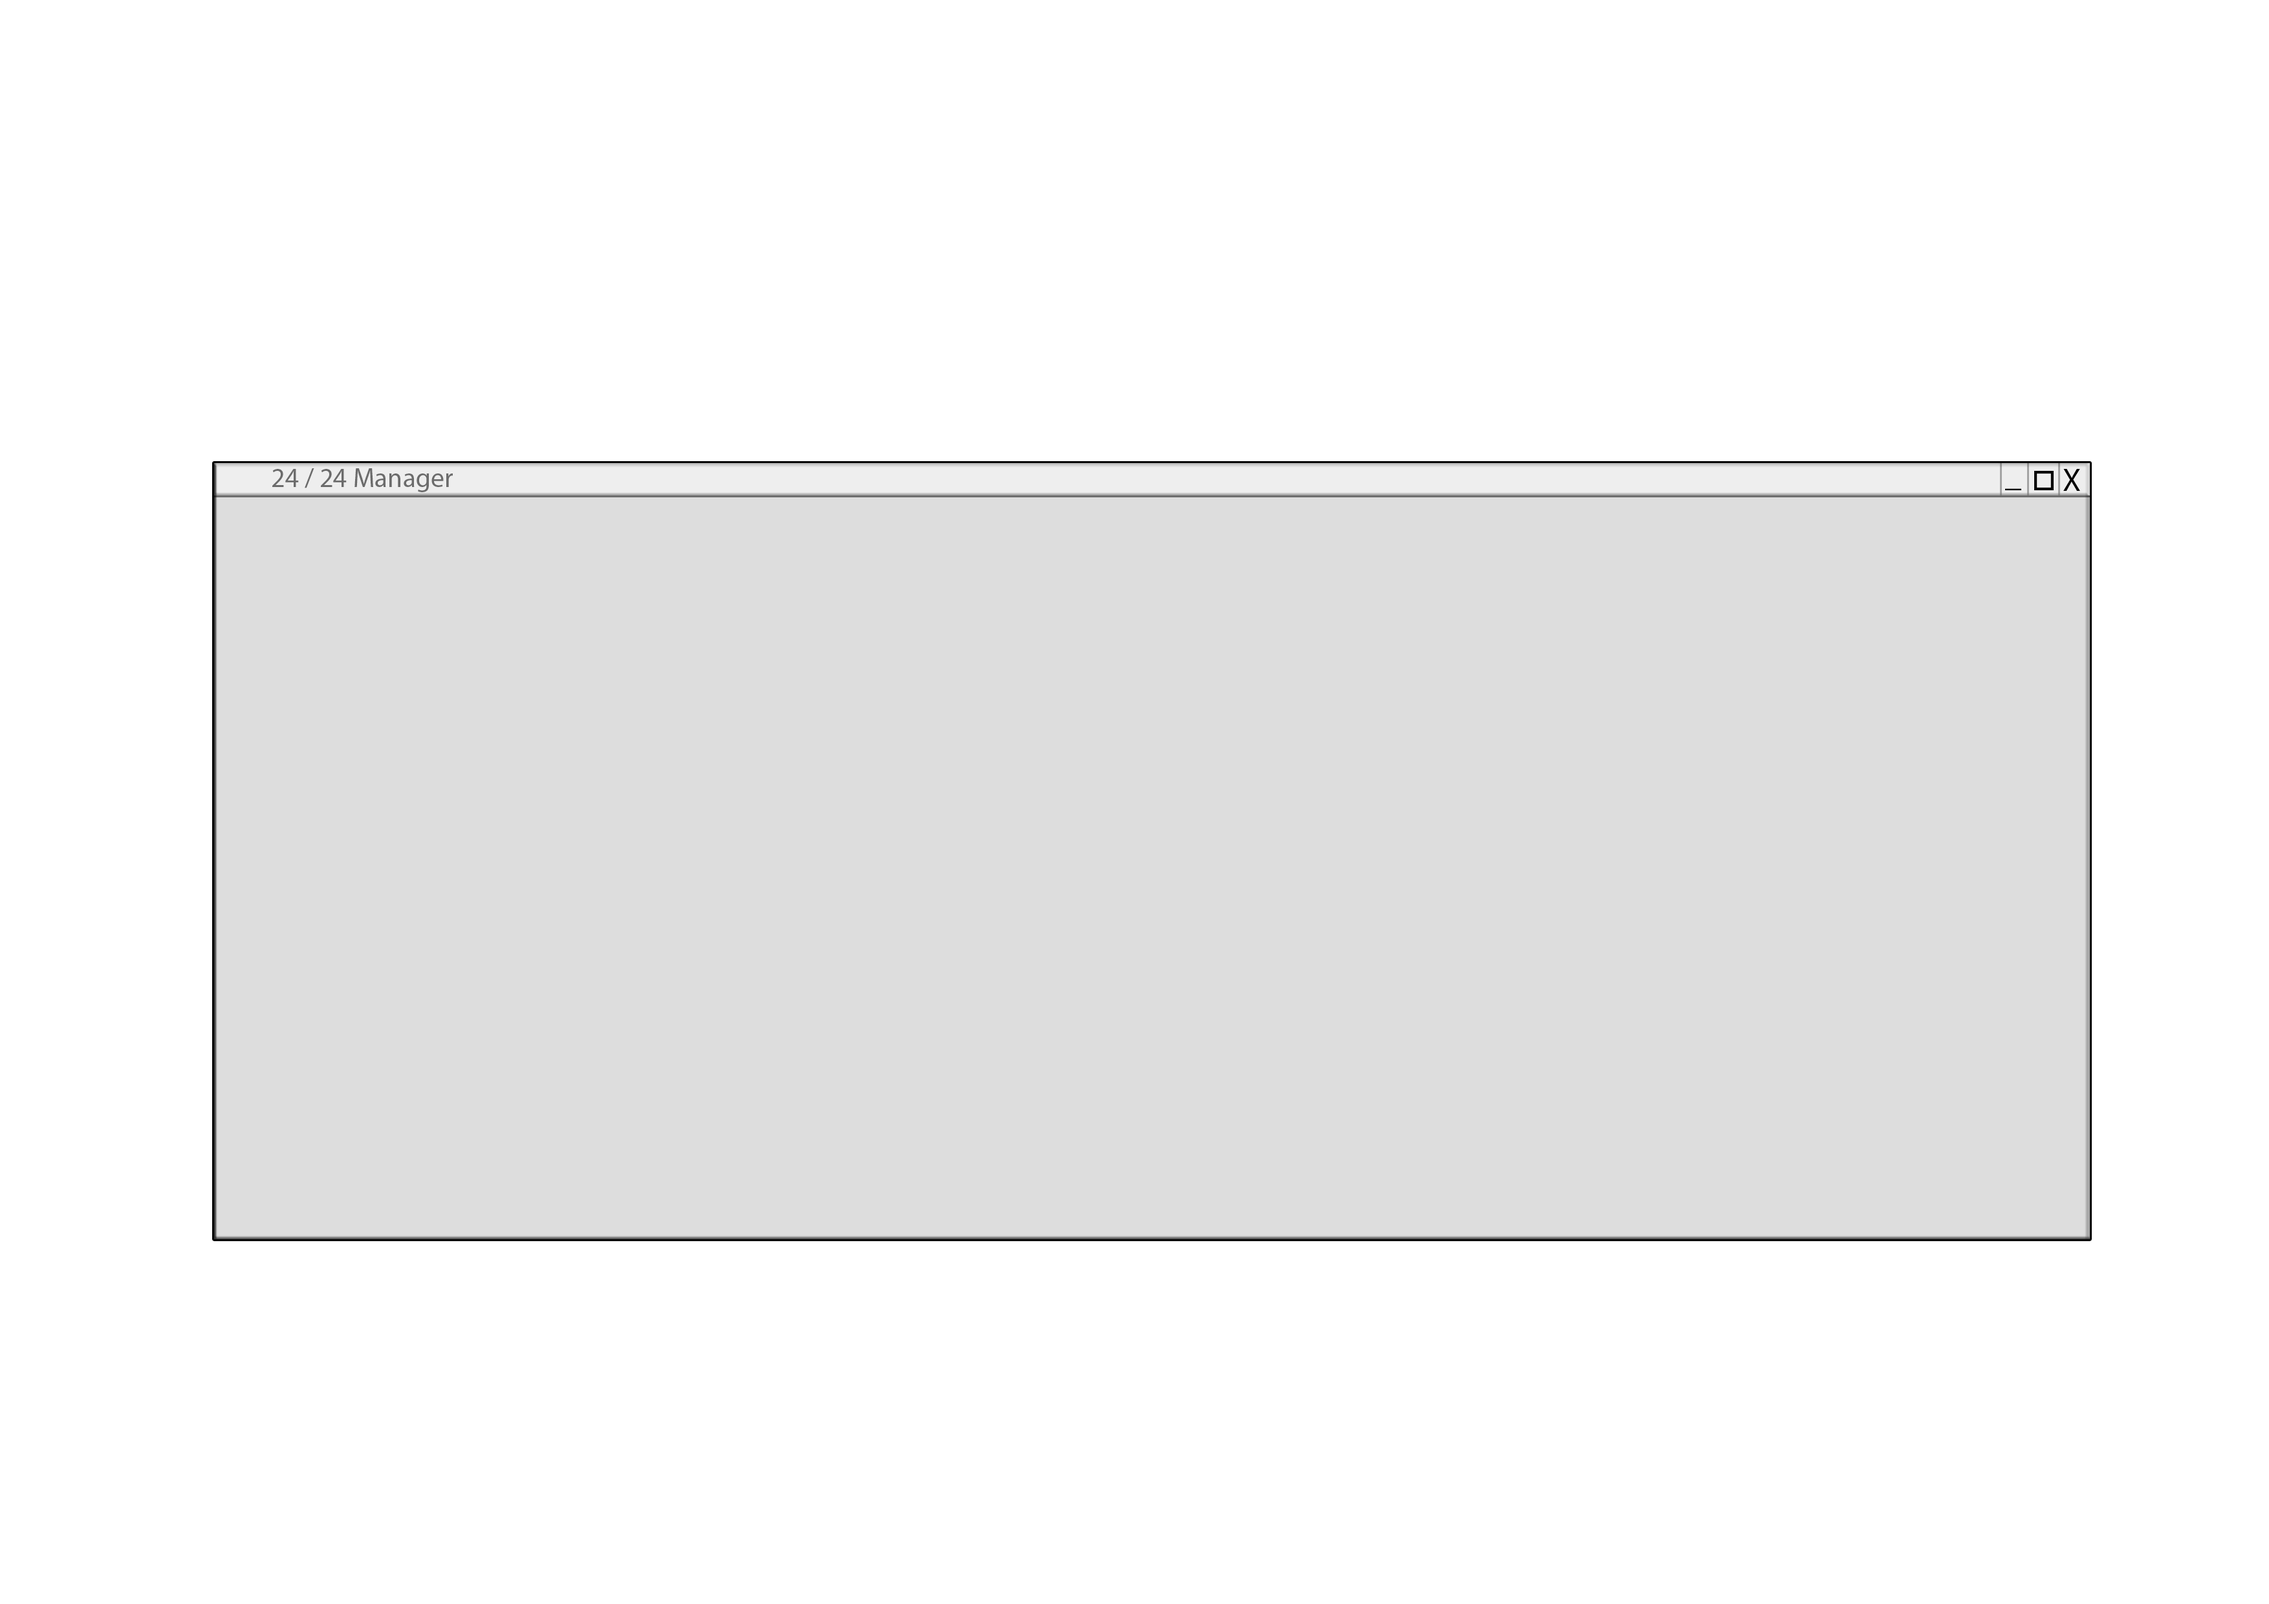
<style>
.page{position:relative;width:2269px;height:1604px;background:#ffffff}
.page>*{position:absolute;margin:0}
.t1{font:26.9px "MyriadPro-Regular";color:#6b6b6b}
.t2{font:7.8px "MyriadPro-Regular";color:#000000}
</style>
<div class="page">
<p class="t1" style="left:272px;top:468px;width:181px;height:24px">24 / 24 Manager</p>
<p class="t2" style="left:2063px;top:469px;width:17px;height:22px">X</p>
<p class="t2" style="left:2005px;top:488px;width:16px;height:2px">_</p>
</div>
